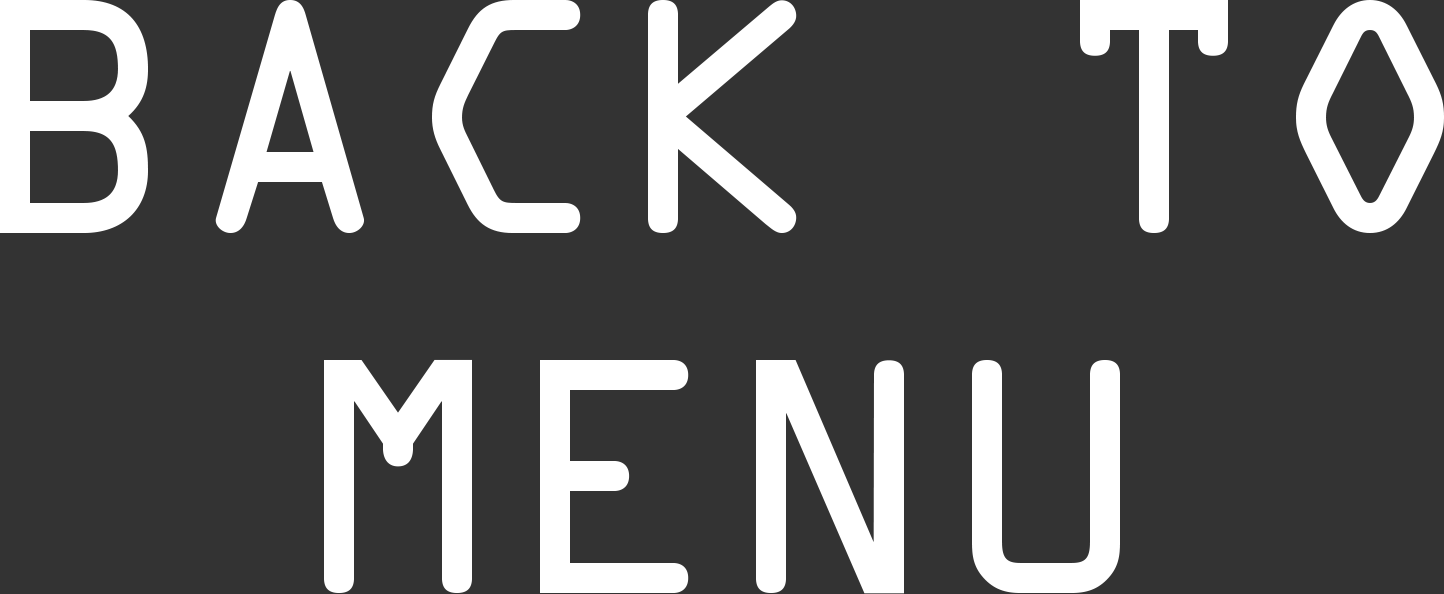
<style>
.page{position:relative;width:1444px;height:594px;background:#333333}
.page>*{position:absolute;margin:0}
.t1{font:300px "OCRAStd";color:#ffffff}
</style>
<div class="page">
<p class="t1" style="left:0px;top:0px;width:1444px;height:594px;text-align:center">BACK TO MENU</p>
</div>
